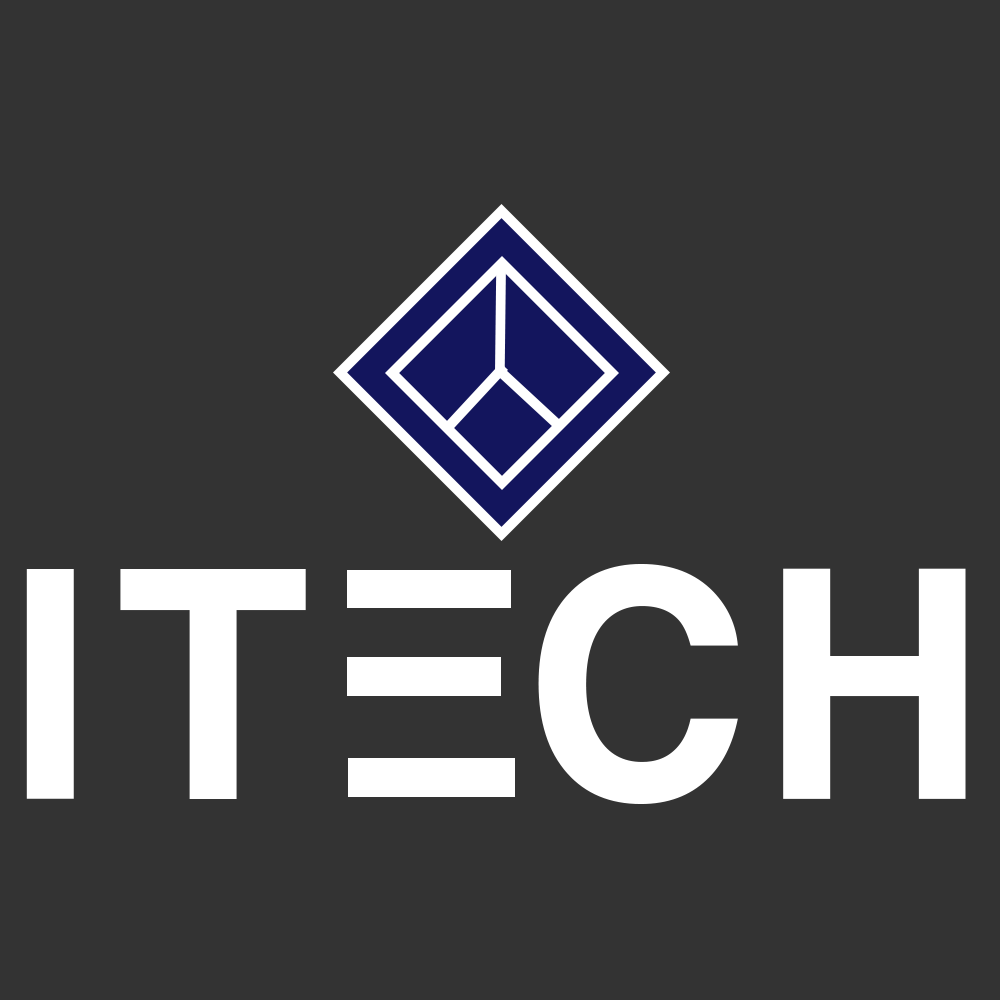
<style>
.page{position:relative;width:1000px;height:1000px;background:#333333}
.page>*{position:absolute;margin:0}
.t1{font:300px "HYgtrE";color:#ffffff}
</style>
<div class="page">
<p class="t1" style="left:26px;top:564px;width:940px;height:240px">IT  CH</p>
</div>
